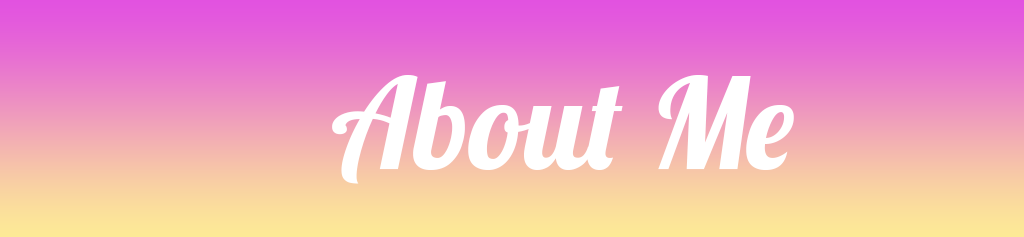
<style>
.page{position:relative;width:1024px;height:237px}
.page>*{position:absolute;margin:0}
.t1{font:125px "Lobster-Regular";color:#ffffff}
</style>
<div class="page">
<p class="t1" style="left:332px;top:75px;width:462px;height:109px">About Me</p>
</div>
